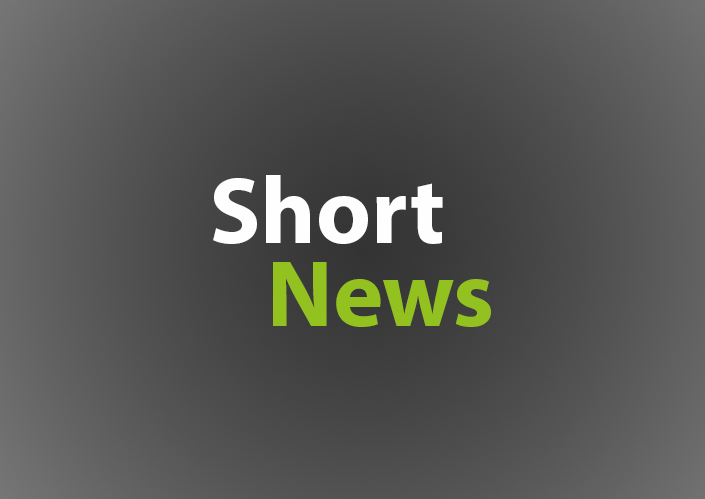
<style>
.page{position:relative;width:705px;height:499px}
.page>*{position:absolute;margin:0}
.t1{font:95.6px/82.8px "MyriadPro-Bold";color:#fefefe}
.t2{font:95.6px/82.8px "MyriadPro-Bold";color:#93c220}
</style>
<div class="page">
<p class="t1" style="left:213px;top:175px;width:278px;height:152px">Short<br>   <span class="t2">News</span></p>
</div>
